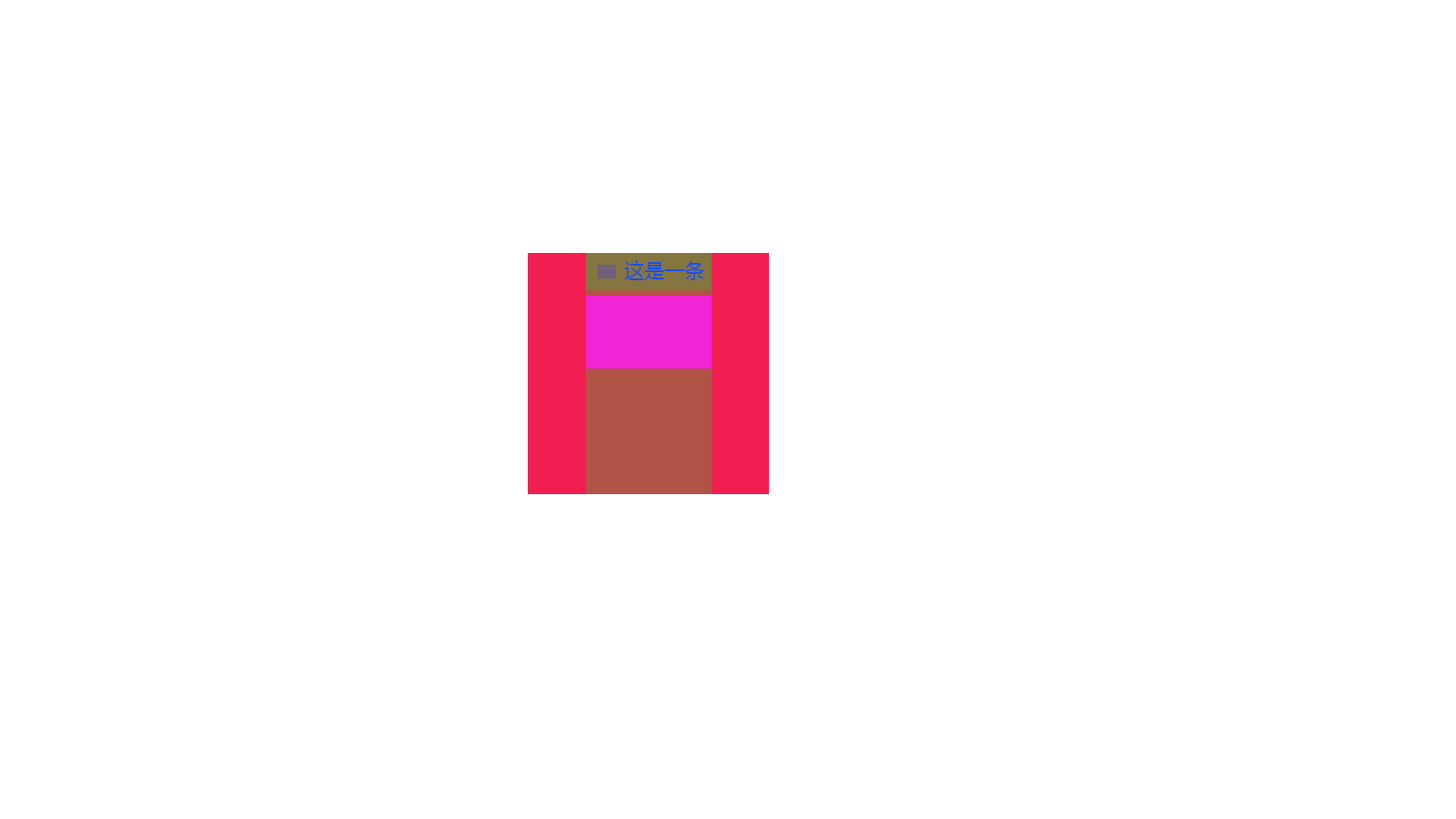
<style>
.page{position:relative;width:1456px;height:819px;background:#ffffff}
.page>*{position:absolute;margin:0}
.t1{font:20px "MicrosoftYaHei";color:#1b50e8}
</style>
<div class="page">
<p class="t1" style="left:624px;top:260px;width:80px;height:20px">这是一条</p>
</div>
